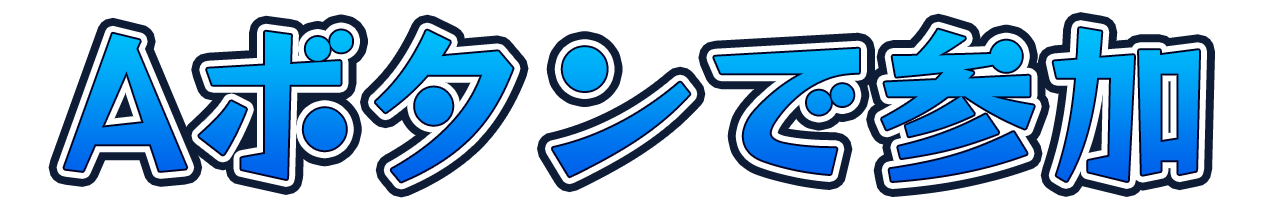
<style>
.page{position:relative;width:1264px;height:210px;background:#ffffff}
.page>*{position:absolute;margin:0}
.t1{font:166.7px "RocknRollOne-Regular";font-weight:bold}
</style>
<div class="page">
<p class="t1" style="left:64px;top:28px;width:1135px;height:154px">Aボタンで参加</p>
</div>
